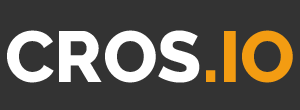
<style>
.page{position:relative;width:300px;height:110px;background:#333333}
.page>*{position:absolute;margin:0}
.t1{font:72px "Raleway-ExtraBold";color:#ffffff}
.t2{font:72px "Raleway-ExtraBold";color:#f39c12}
</style>
<div class="page">
<p class="t1" style="left:7px;top:30px;width:286px;height:53px">CROS<span class="t2">.IO</span></p>
</div>
